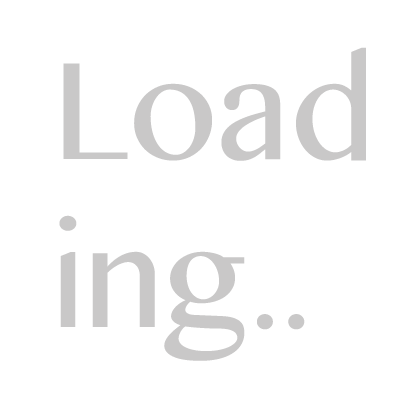
<style>
.page{position:relative;width:420px;height:420px;background:#ffffff}
.page>*{position:absolute;margin:0}
.t1{font:140px "LaoMN";color:#c9c8c8}
</style>
<div class="page">
<p class="t1" style="left:59px;top:47px;width:307px;height:314px">Load<br>ing..</p>
</div>
